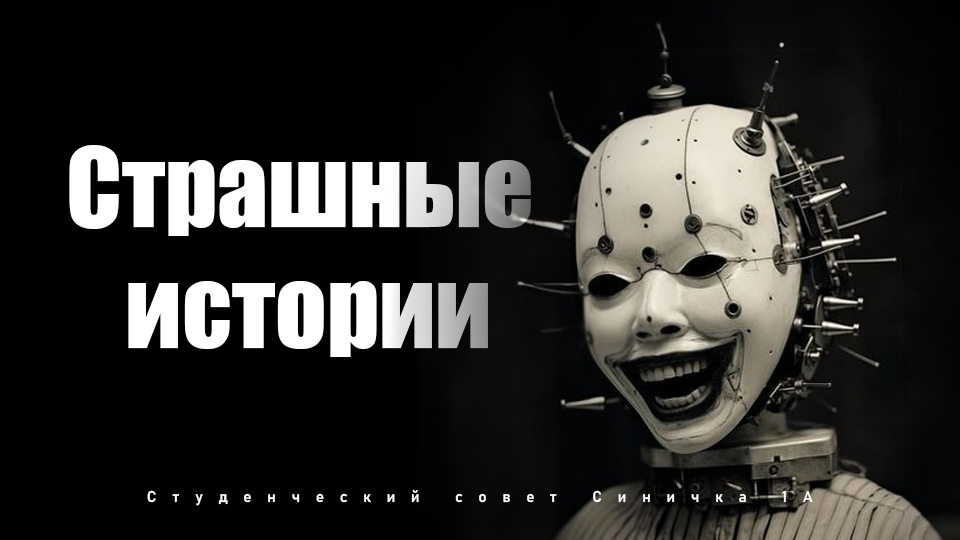
<style>
.page{position:relative;width:960px;height:540px;background:#000000}
.page>*{position:absolute;margin:0}
.t1{font:100.9px "Impact";color:#ffffff}
.t2{font:15.5px "Bahnschrift_576.000wght";letter-spacing:1em;color:#ffffff}
</style>
<div class="page">
<p class="t1" style="left:69px;top:145px;width:462px;height:212px;text-align:center">Страшные <br>истории</p>
<p class="t2" style="left:147px;top:489px;width:666px;height:17px">Студенческий совет Синичка 1А</p>
</div>
